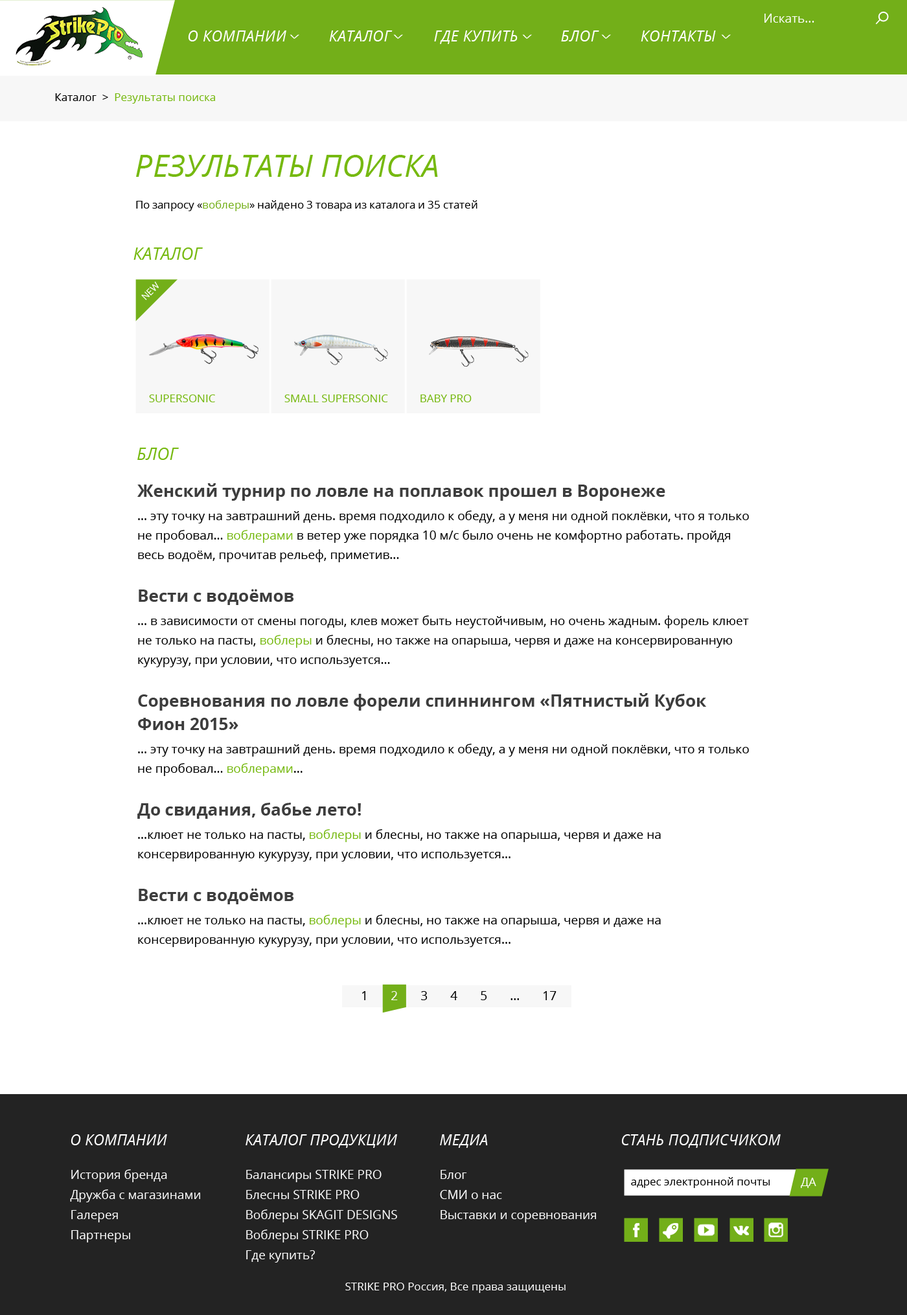
<style>
.page{position:relative;width:907px;height:1315px;background:#ffffff}
.page>*{position:absolute;margin:0}
.t1{font:12.3px "OpenSans";color:#ffffff}
.t2{font:14.9px "OpenSans-Italic";letter-spacing:0.025em;color:#ffffff;text-transform:uppercase}
.t3{font:19px "OpenSans";color:#ffffff;text-transform:uppercase;scale:0.43 1}
.t4{font:11px "OpenSans";color:#76b910}
.t5{font:11px "OpenSans";color:#000000}
.t6{font:31.1px "OpenSans-Italic";color:#76b910;text-transform:uppercase}
.t7{font:11px "OpenSans";color:#73af19}
.t8{font:16.8px "OpenSans-Italic";letter-spacing:0.01em;color:#76b910;text-transform:uppercase}
.t9{font:9.2px "OpenSans";color:#ffffff;text-transform:uppercase}
.t10{font:11px "OpenSans";color:#76b910;text-transform:uppercase}
.t11{font:12.3px/19.4px "OpenSans";color:#000000}
.t12{font:16.8px/23.3px "OpenSans-Bold";color:#3d3d3d}
.t13{font:12.3px/23.3px "OpenSans";color:#000000}
.t14{font:12.3px/19.4px "OpenSans";color:#76b910}
.t15{font:16.8px/19.4px "OpenSans-Bold";color:#3d3d3d}
.t16{font:16.8px/16.8px "OpenSans-Bold";color:#3d3d3d}
.t17{font:12.3px/23.3px "OpenSans";color:#76b910}
.t18{font:12.3px "OpenSans";color:#000000}
.t19{font:12.3px "OpenSans";color:#f7f7f7}
.t20{font:14.9px "OpenSans-Italic";letter-spacing:0.01em;color:#ffffff;text-transform:uppercase}
.t21{font:12.3px/20.1px "OpenSans";color:#ffffff}
.t22{font:11.7px "OpenSans";color:#ffffff;text-transform:uppercase}
.t23{font:11px "OpenSans";color:#ffffff}
</style>
<div class="page">
<p class="t1" style="left:764px;top:14px;width:50px;height:9px">Искать...</p>
<p class="t2" style="left:188px;top:30px;width:528px;height:14px">О компании          Каталог          где купить          блог          контакты</p>
<p class="t3" style="left:290px;top:34px;width:9px;height:5px;rotate:90deg">&gt;</p>
<p class="t3" style="left:393px;top:34px;width:10px;height:5px;rotate:90deg">&gt;</p>
<p class="t3" style="left:522px;top:34px;width:10px;height:5px;rotate:90deg">&gt;</p>
<p class="t3" style="left:601px;top:34px;width:10px;height:5px;rotate:90deg">&gt;</p>
<p class="t3" style="left:721px;top:34px;width:10px;height:5px;rotate:90deg">&gt;</p>
<p class="t4" style="left:55px;top:93px;width:160px;height:11px"><span class="t5">Каталог  &gt;  </span>Результаты поиска</p>
<p class="t6" style="left:136px;top:155px;width:302px;height:22px">Результаты поиска</p>
<p class="t5" style="left:136px;top:200px;width:341px;height:11px">По запросу «<span class="t7">воблеры</span>» найдено 3 товара из каталога и 35 статей</p>
<p class="t8" style="left:133px;top:247px;width:70px;height:13px">Каталог</p>
<p class="t9" style="left:141px;top:281px;width:18px;height:20px;rotate:-45deg">NEw</p>
<p class="t10" style="left:149px;top:394px;width:66px;height:8px">Supersonic</p>
<p class="t10" style="left:284px;top:394px;width:104px;height:8px">Small Supersonic</p>
<p class="t10" style="left:420px;top:394px;width:52px;height:8px">Baby Pro</p>
<p class="t8" style="left:137px;top:448px;width:42px;height:12px">Блог</p>
<p class="t11" style="left:137px;top:483px;width:612px;height:464px"><span class="t12">Женский турнир по ловле на поплавок прошел в Воронеже<br></span><span class="t13">... эту точку на завтрашний день. время подход</span>ило к обеду, а у меня ни одной поклёвки, что я только не пробовал… <span class="t14">воблерами</span> в ветер уже порядка 10 м/с было очень не комфортно работать. пройдя весь водоём, прочитав рельеф, приметив...<br><br><span class="t15">Вести с водо</span><span class="t12">ёмов<br></span><span class="t13">... в зависимости о</span>т смены погоды, клев может быть неустойчивым, но очень жадным. форель клюет не только на пасты, <span class="t14">воблеры</span> и блесны, но также на опарыша, червя и даже на консервированную кукурузу, при условии, что используется...<br><br><span class="t16">Соревнов</span><span class="t12">ания по ловле форели спиннингом «Пятнистый Кубок Фион 2015»<br></span><span class="t13">... эту точку на з</span>автрашний день. время подходило к обеду, а у меня ни одной поклёвки, что я только не пробовал… <span class="t14">воблерами</span>...<br><br><span class="t15">До свидания, бабье </span><span class="t12">лето!<br></span><span class="t13">...клюет не только на пасты, </span><span class="t17">в</span><span class="t14">облеры</span> и блесны, но также на опарыша, червя и даже на консервированную кукурузу, при условии, что используется...<br><br><span class="t15">Вести с водоём</span><span class="t12">ов<br></span><span class="t13">...клюет не только на паст</span>ы, <span class="t14">воблеры</span> и блесны, но также на опарыша, червя и даже на консервированную кукурузу, при условии, что используется...</p>
<p class="t18" style="left:362px;top:991px;width:194px;height:9px">1       <span class="t19">2</span>       3       4       5       ...       17</p>
<p class="t20" style="left:71px;top:1134px;width:96px;height:11px">о компании</p>
<p class="t20" style="left:245px;top:1134px;width:152px;height:14px">каталог продукции</p>
<p class="t20" style="left:440px;top:1134px;width:48px;height:14px">Медиа</p>
<p class="t20" style="left:621px;top:1134px;width:160px;height:14px">стань подписчиком</p>
<p class="t21" style="left:70px;top:1169px;width:130px;height:73px">История бренда<br>Дружба с магазинами<br>Галерея<br>Партнеры</p>
<p class="t21" style="left:246px;top:1170px;width:151px;height:92px">Балансиры STRIKE PRO<br>Блесны STRIKE PRO<br>Воблеры SKAGIT DESIGNS<br>Воблеры STRIKE PRO<br>Где купить?</p>
<p class="t21" style="left:440px;top:1170px;width:156px;height:52px">Блог<br>СМИ о нас<br>Выставки и соревнования</p>
<p class="t5" style="left:631px;top:1177px;width:139px;height:11px">адрес электронной почты</p>
<p class="t22" style="left:801px;top:1178px;width:15px;height:10px">Да</p>
<p class="t23" style="left:345px;top:1283px;width:220px;height:10px">STRIKE PRO Россия, Все права защищены</p>
</div>
